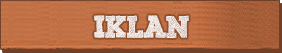
<style>
.page{position:relative;width:282px;height:53px}
.page>*{position:absolute;margin:0}
.t1{font:30px "ScribbleBoxDEMO";color:#f8f3f1}
</style>
<div class="page">
<p class="t1" style="left:94px;top:15px;width:95px;height:24px">Iklan</p>
</div>
